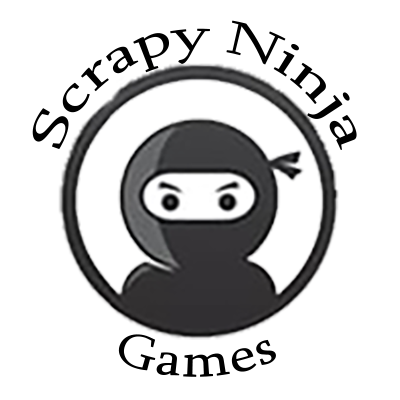
<style>
.page{position:relative;width:400px;height:400px;background:#ffffff}
.page>*{position:absolute;margin:0}
.t1{font:48px "Sylfaen";color:#000000}
</style>
<div class="page">
<p class="t1" style="left:32px;top:20px;width:325px;height:130px">Scrapy Ninja</p>
<p class="t1" style="left:118px;top:334px;width:158px;height:43px">Games</p>
</div>
